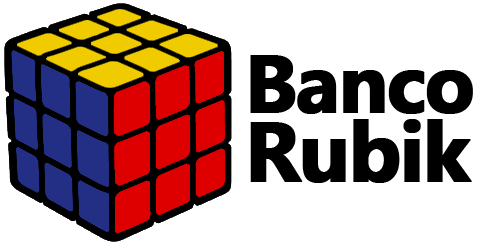
<style>
.page{position:relative;width:480px;height:246px;background:#ffffff}
.page>*{position:absolute;margin:0}
.t1{font:81.2px/69.2px "KhmerUI-Bold";letter-spacing:-0.04em;color:#000000;font-weight:bold}
.t2{font:84.2px/69.2px "KhmerUI-Bold";letter-spacing:-0.04em;color:#000000;font-weight:bold}
</style>
<div class="page">
<p class="t1" style="left:250px;top:55px;width:223px;height:128px">Banco<br><span class="t2">Rubik</span></p>
</div>
